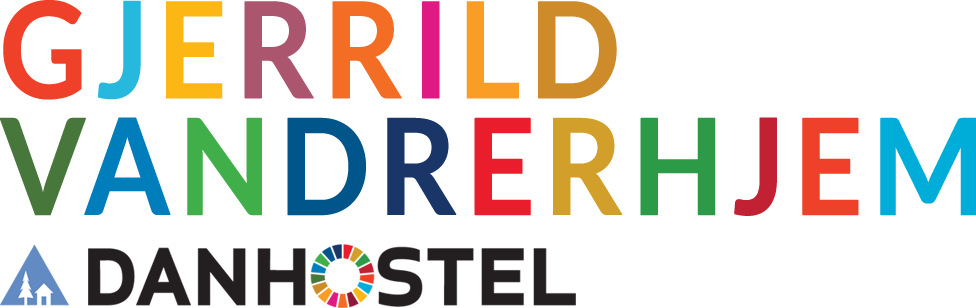
<style>
.page{position:relative;width:976px;height:308px;background:#ffffff}
.page>*{position:absolute;margin:0}
.t1{font:132.9px/116.7px "Lato-Bold";letter-spacing:0.046em;color:#ef412a;font-weight:bold;scale:0.91 1}
.t2{font:132.9px/116.7px "Lato-Bold";letter-spacing:0.046em;color:#26b9dd;font-weight:bold;scale:0.91 1}
.t3{font:132.9px/116.7px "Lato-Bold";letter-spacing:0.046em;color:#fdb714;font-weight:bold;scale:0.91 1}
.t4{font:132.9px/116.7px "Lato-Bold";letter-spacing:0.046em;color:#ac556e;font-weight:bold;scale:0.91 1}
.t5{font:132.9px/116.7px "Lato-Bold";letter-spacing:0.046em;color:#f36e24;font-weight:bold;scale:0.91 1}
.t6{font:132.9px/116.7px "Lato-Bold";letter-spacing:0.046em;color:#e01a83;font-weight:bold;scale:0.91 1}
.t7{font:132.9px/116.7px "Lato-Bold";letter-spacing:0.046em;color:#f99d25;font-weight:bold;scale:0.91 1}
.t8{font:132.9px/116.7px "Lato-Bold";letter-spacing:0.046em;color:#cd8b2a;font-weight:bold;scale:0.91 1}
.t9{font:132.9px/116.7px "Lato-Bold";letter-spacing:0.046em;color:#48773c;font-weight:bold;scale:0.91 1}
.t10{font:132.9px/116.7px "Lato-Bold";letter-spacing:0.046em;color:#007dbb;font-weight:bold;scale:0.91 1}
.t11{font:132.9px/116.7px "Lato-Bold";letter-spacing:0.046em;color:#40ae49;font-weight:bold;scale:0.91 1}
.t12{font:132.9px/116.7px "Lato-Bold";letter-spacing:0.046em;color:#00558a;font-weight:bold;scale:0.91 1}
.t13{font:132.9px/116.7px "Lato-Bold";letter-spacing:0.046em;color:#1a3668;font-weight:bold;scale:0.91 1}
.t14{font:132.9px/116.7px "Lato-Bold";letter-spacing:0.046em;color:#ea1d2d;font-weight:bold;scale:0.91 1}
.t15{font:132.9px/116.7px "Lato-Bold";letter-spacing:0.046em;color:#d19f2a;font-weight:bold;scale:0.91 1}
.t16{font:132.9px/116.7px "Lato-Bold";letter-spacing:0.046em;color:#2d9a47;font-weight:bold;scale:0.91 1}
.t17{font:132.9px/116.7px "Lato-Bold";letter-spacing:0.046em;color:#c22033;font-weight:bold;scale:0.91 1}
.t18{font:132.9px/116.7px "Lato-Bold";letter-spacing:0.046em;color:#00add8;font-weight:bold;scale:0.91 1}
</style>
<div class="page">
<p class="t1" style="left:0px;top:0px;width:976px;height:216px">G<span class="t2">J</span><span class="t3">E</span><span class="t4">R</span><span class="t5">R</span><span class="t6">I</span><span class="t7">L</span><span class="t8">D <br></span><span class="t9">V</span><span class="t10">A</span><span class="t11">N</span><span class="t12">D</span><span class="t13">R</span><span class="t14">E</span><span class="t15">R</span><span class="t16">H</span><span class="t17">J</span>E<span class="t18">M</span></p>
</div>
